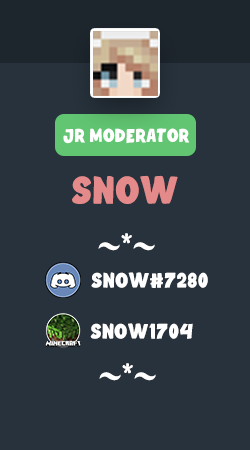
<style>
.page{position:relative;width:250px;height:450px;background:#27323c}
.page>*{position:absolute;margin:0}
.t1{font:18.1px "MoroBaby-Bold";color:#ffffff;text-transform:uppercase}
.t2{font:37.5px "MoroBaby-Bold";color:#e48a8a;text-transform:uppercase}
.t3{font:37.5px "MoroBaby-Bold";color:#ffffff;text-transform:uppercase}
.t4{font:20.3px "MoroBaby-Bold";color:#ffffff;text-transform:uppercase}
</style>
<div class="page">
<p class="t1" style="left:63px;top:128px;width:127px;height:16px">Jr Moderator</p>
<p class="t2" style="left:72px;top:175px;width:106px;height:29px">Snow</p>
<p class="t3" style="left:98px;top:233px;width:57px;height:18px">~*~</p>
<p class="t4" style="left:91px;top:272px;width:117px;height:16px">snow#7280</p>
<p class="t4" style="left:90px;top:323px;width:103px;height:16px">Snow1704</p>
<p class="t3" style="left:99px;top:363px;width:57px;height:18px">~*~</p>
</div>
